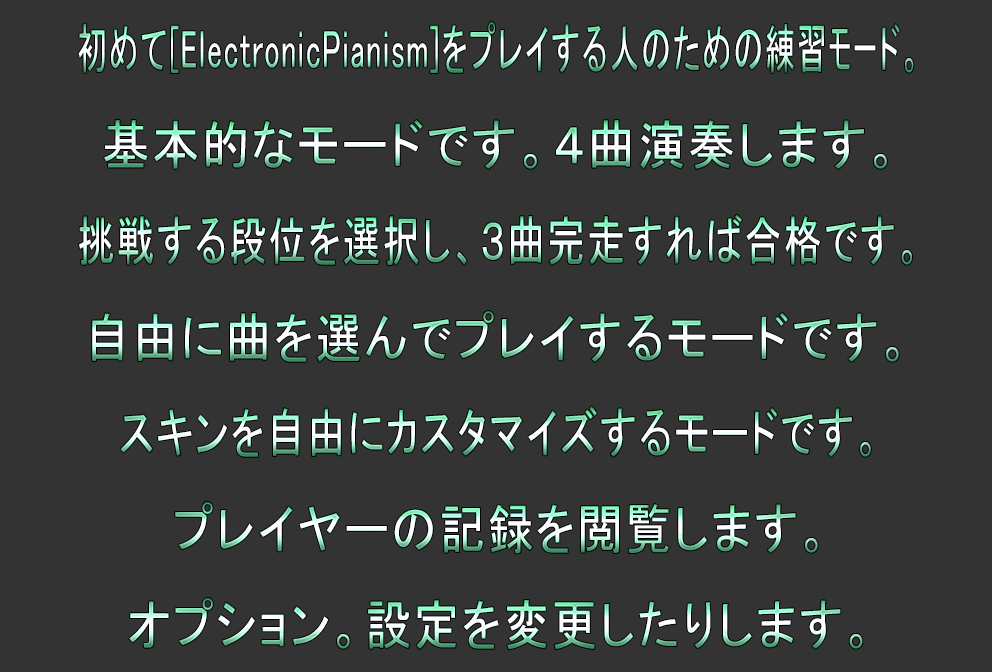
<style>
.page{position:relative;width:992px;height:672px;background:#333333}
.page>*{position:absolute;margin:0}
.t1{font:54px "MS-PGothic";letter-spacing:0.05em;scale:0.56 1}
.t2{font:54px "MS-UIGothic";letter-spacing:0.05em;scale:0.56 1}
.t3{font:54px "MS-PGothic";letter-spacing:0.05em;scale:0.88 1}
.t4{font:54px "MS-PGothic";letter-spacing:0.05em;scale:0.7 1}
.t5{font:54px "MS-PGothic";letter-spacing:0.05em;scale:0.85 1}
.t6{font:54px "MS-PGothic";letter-spacing:0.05em;scale:0.72 1}
</style>
<div class="page">
<p class="t1" style="left:78px;top:22px;width:836px;height:51px">初めて[ElectronicPianism]をプレイする人のための練<span class="t2">習モー</span>ド。</p>
<p class="t3" style="left:104px;top:120px;width:783px;height:49px">基本的なモードです。４曲演奏します。</p>
<p class="t4" style="left:79px;top:214px;width:833px;height:52px">挑戦する段位を選択し、３曲完走すれば合格です。</p>
<p class="t5" style="left:92px;top:311px;width:807px;height:51px">自由に曲を選んでプレイするモードです。</p>
<p class="t6" style="left:120px;top:406px;width:751px;height:51px">スキンを自由にカスタマイズするモードです。</p>
<p class="t5" style="left:175px;top:502px;width:643px;height:52px">プレイヤーの記録を閲覧します。</p>
<p class="t5" style="left:129px;top:598px;width:734px;height:52px">オプション。設定を変更したりします。</p>
</div>
